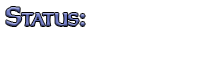
<style>
.page{position:relative;width:200px;height:75px;background:#ffffff}
.page>*{position:absolute;margin:0}
.t1{font:27px "LHFUncialCaps";font-variant:small-caps}
</style>
<div class="page">
<p class="t1" style="left:6px;top:7px;width:79px;height:19px">Status:</p>
</div>
